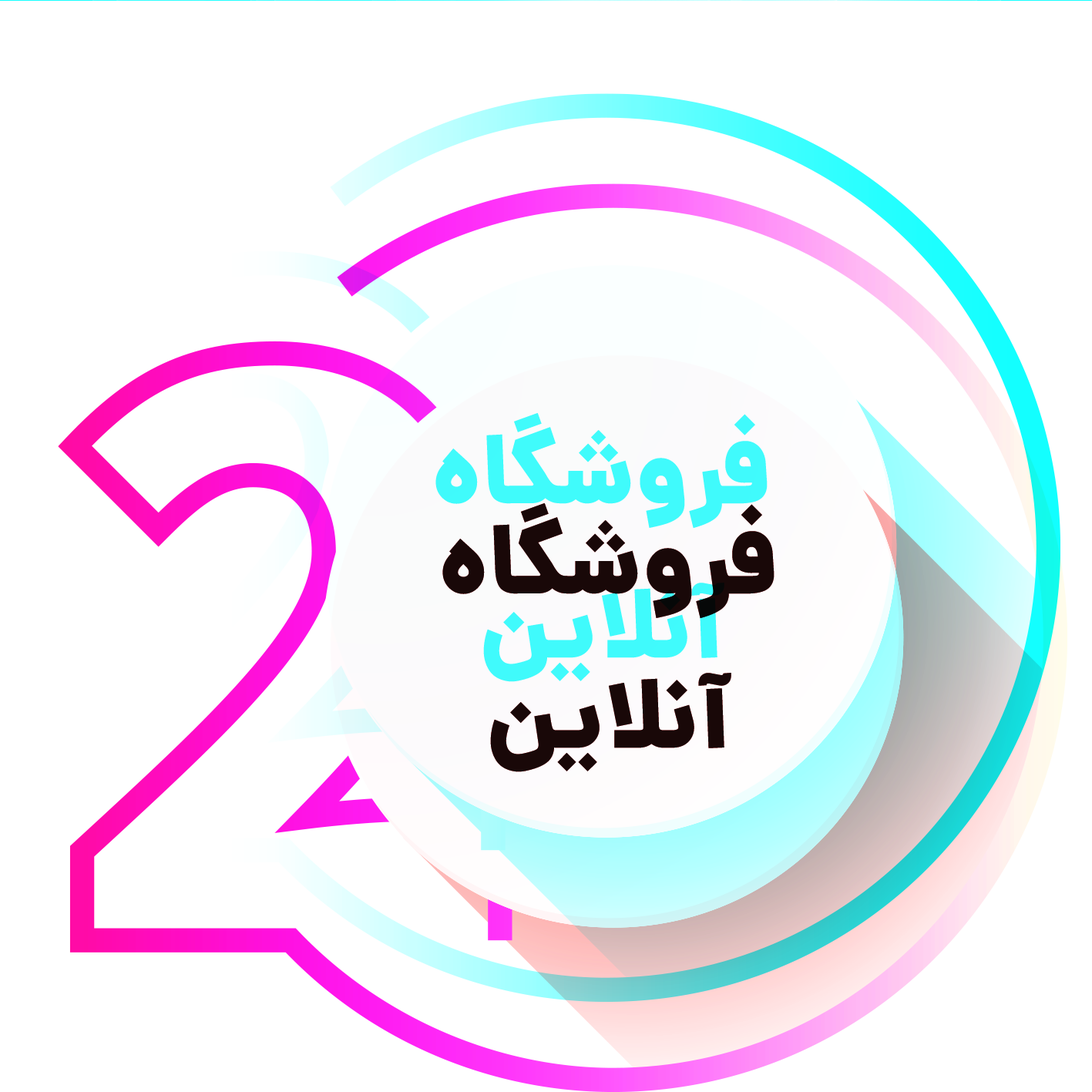
<style>
.page{position:relative;width:1092px;height:1092px;background:#ffffff}
.page>*{position:absolute;margin:0}
.t1{font:96.3px/154.1px "Dana-Black";color:#40fafc}
</style>
<div class="page">
<p class="t1" style="left:435px;top:412px;width:333px;height:269px;text-align:center">فروشگاه آنلاین</p>
</div>
